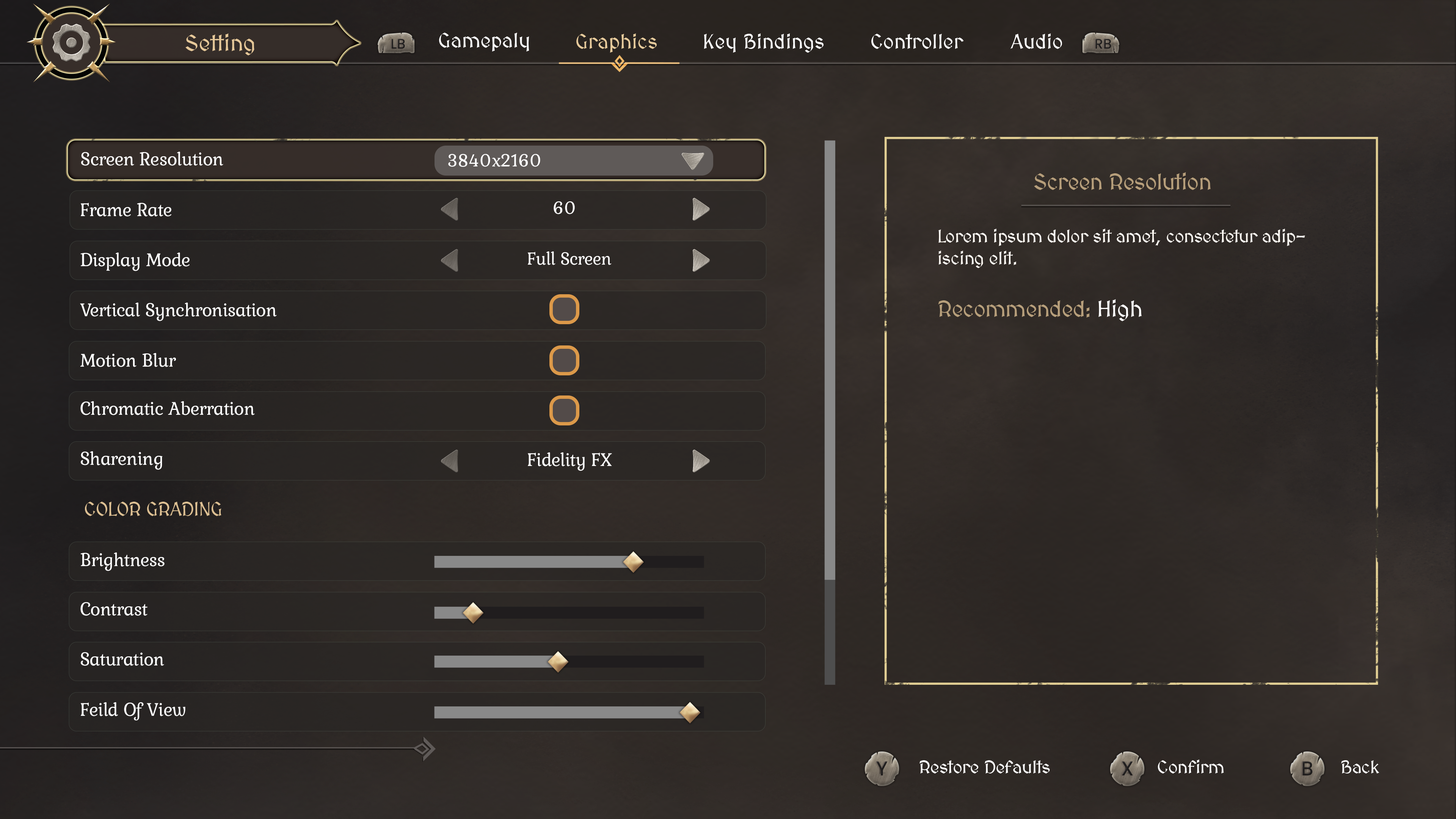
<style>
.page{position:relative;width:1456px;height:819px}
.page>*{position:absolute;margin:0}
.t1{font:22.7px "MedievalSharp";color:#e6c899}
.t2{font:20.5px "MedievalSharp";color:#fefefe}
.t3{font:20.5px "MedievalSharp";color:#e7cb9c}
.t4{font:20.5px "MedievalSharp";color:#ffffff}
.t5{font:19.2px "Kurale-Regular";letter-spacing:-0.02em;color:#ffffff}
.t6{font:18.2px "Kurale-Regular";letter-spacing:-0.02em;color:#ffffff}
.t7{font:22.7px "MedievalSharp";letter-spacing:-0.02em;color:#b79f7b}
.t8{font:18.2px "MedievalSharp";letter-spacing:-0.02em;color:#fffbf5}
.t9{font:22.7px "MedievalSharp";letter-spacing:-0.02em;color:#ffffff}
.t10{font:19.2px "MedievalSharp";letter-spacing:-0.02em;color:#ddc093}
.t11{font:18.2px "MedievalSharp";letter-spacing:-0.02em;color:#ffffff}
</style>
<div class="page">
<p class="t1" style="left:185px;top:33px;width:69px;height:22px">Setting</p>
<p class="t2" style="left:439px;top:33px;width:90px;height:19px">Gamepaly</p>
<p class="t3" style="left:576px;top:33px;width:81px;height:20px">Graphics</p>
<p class="t4" style="left:704px;top:33px;width:120px;height:20px">Key Bindings</p>
<p class="t4" style="left:871px;top:34px;width:93px;height:15px">Controller</p>
<p class="t4" style="left:1010px;top:33px;width:52px;height:16px">Audio</p>
<p class="t5" style="left:81px;top:152px;width:142px;height:14px">Screen Resolution</p>
<p class="t6" style="left:448px;top:154px;width:92px;height:13px">3840x2160</p>
<p class="t7" style="left:1034px;top:172px;width:177px;height:18px">Screen Resolution</p>
<p class="t5" style="left:81px;top:203px;width:90px;height:14px">Frame Rate</p>
<p class="t6" style="left:554px;top:201px;width:21px;height:13px">60</p>
<p class="t8" style="left:938px;top:229px;width:367px;height:39px">Lorem ipsum dolor sit amet, consectetur adipiscing elit.</p>
<p class="t5" style="left:80px;top:253px;width:110px;height:18px">Display Mode</p>
<p class="t6" style="left:527px;top:251px;width:85px;height:14px">Full Screen</p>
<p class="t5" style="left:80px;top:303px;width:197px;height:18px">Vertical Synchronisation</p>
<p class="t7" style="left:938px;top:299px;width:204px;height:22px">Recommended: <span class="t9">High</span></p>
<p class="t5" style="left:80px;top:353px;width:96px;height:14px">Motion Blur</p>
<p class="t5" style="left:80px;top:401px;width:175px;height:14px">Chromatic Aberration</p>
<p class="t5" style="left:81px;top:451px;width:82px;height:19px">Sharening</p>
<p class="t5" style="left:528px;top:452px;width:84px;height:19px">Fidelity FX</p>
<p class="t10" style="left:85px;top:502px;width:136px;height:14px">COLOR GRADING</p>
<p class="t5" style="left:80px;top:552px;width:85px;height:19px">Brightness</p>
<p class="t5" style="left:80px;top:602px;width:67px;height:14px">Contrast</p>
<p class="t5" style="left:81px;top:652px;width:83px;height:14px">Saturation</p>
<p class="t5" style="left:81px;top:702px;width:104px;height:18px">Feild Of View</p>
<p class="t11" style="left:919px;top:760px;width:131px;height:13px">Restore Defaults</p>
<p class="t11" style="left:1158px;top:759px;width:66px;height:14px">Confirm</p>
<p class="t11" style="left:1341px;top:760px;width:38px;height:13px">Back</p>
</div>
